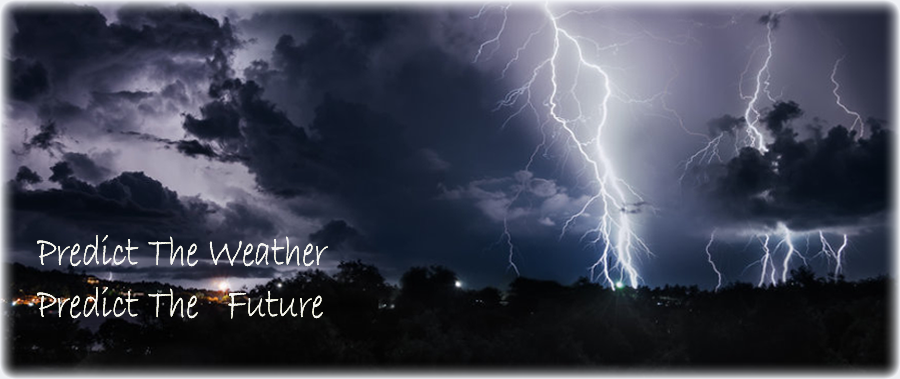
<style>
.page{position:relative;width:900px;height:379px}
.page>*{position:absolute;margin:0}
.t1{font:44px "BradleyHandITC";color:#e2e5ec;scale:0.8 1}
</style>
<div class="page">
<p class="t1" style="left:37px;top:235px;width:291px;height:84px">Predict The Weather<br>Predict The  Future</p>
</div>
